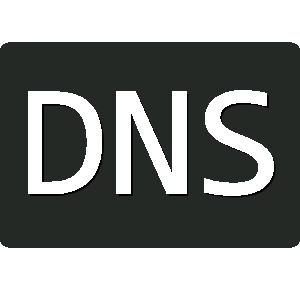
<style>
.page{position:relative;width:300px;height:300px;background:#242926}
.page>*{position:absolute;margin:0}
.t1{font:160px "Consolas";color:#ffffff}
</style>
<div class="page">
<p class="t1" style="left:30px;top:92px;width:246px;height:106px">DNS</p>
</div>
